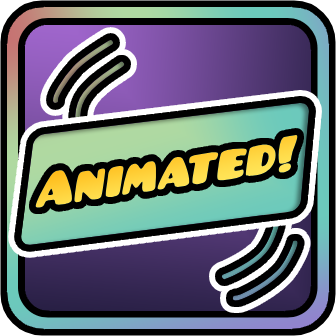
<style>
.page{position:relative;width:336px;height:336px;background:#000000}
.page>*{position:absolute;margin:0}
.t1{font:54.2px "Pusab";color:#ffce4e;scale:0.96 1}
.t2{font:54.2px "Pusab";color:#ffc52d;scale:0.96 1}
</style>
<div class="page">
<p class="t1" style="left:35px;top:135px;width:263px;height:73px;rotate:-9deg">Animated!</p>
<p class="t2" style="left:35px;top:135px;width:263px;height:73px;rotate:-9deg">Animated!</p>
</div>
